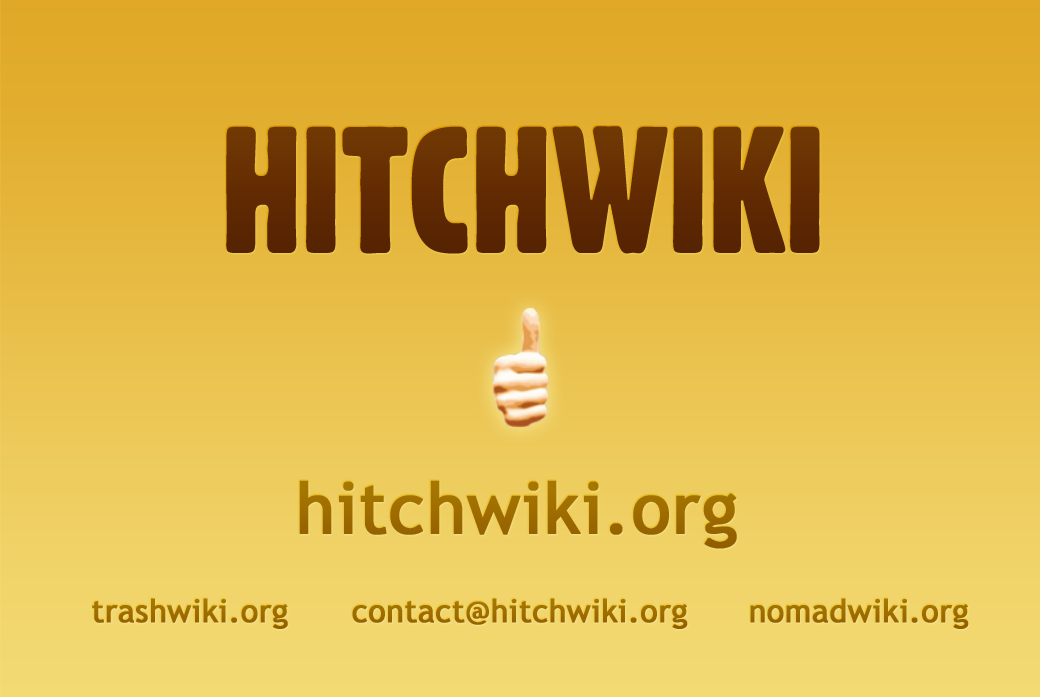
<style>
.page{position:relative;width:1040px;height:697px}
.page>*{position:absolute;margin:0}
.t1{font:175.4px "Gothic821CondensedBT-Regular";color:#632b02;text-transform:uppercase}
.t2{font:71.1px "TrebuchetMS";color:#9d6b00;font-weight:bold}
.t3{font:31.7px "TrebuchetMS";color:#9d6b00;font-weight:bold}
</style>
<div class="page">
<p class="t1" style="left:226px;top:126px;width:594px;height:128px">Hitchwiki</p>
<p class="t2" style="left:299px;top:480px;width:438px;height:69px">hitchwiki.org</p>
<p class="t3" style="left:92px;top:598px;width:196px;height:31px">trashwiki.org</p>
<p class="t3" style="left:352px;top:598px;width:336px;height:31px">contact@hitchwiki.org</p>
<p class="t3" style="left:750px;top:598px;width:219px;height:31px">nomadwiki.org</p>
</div>
